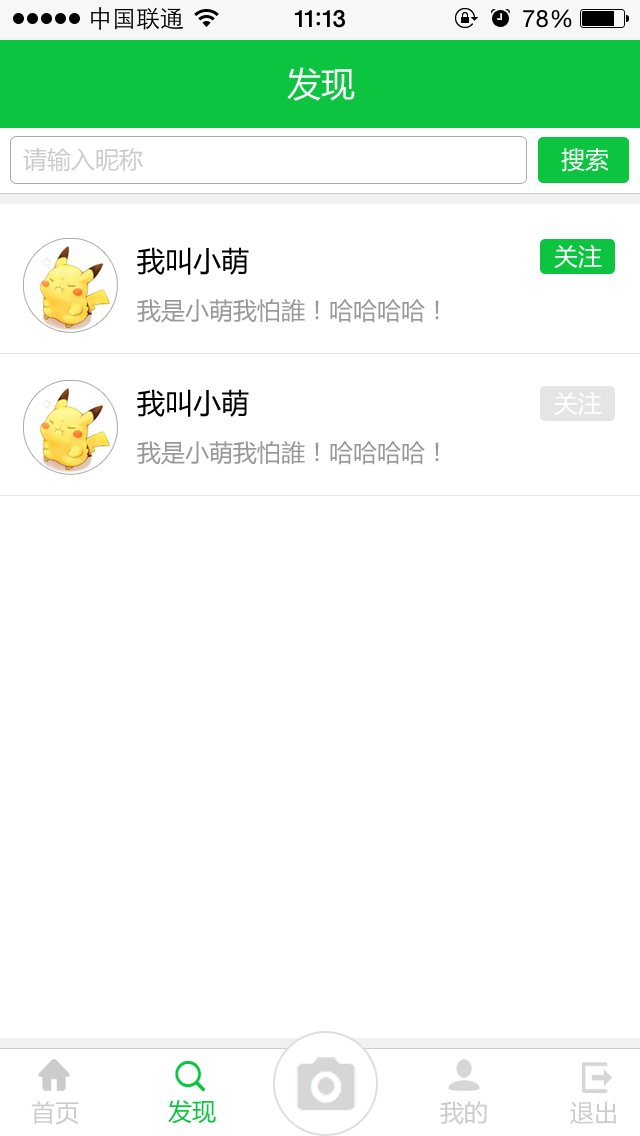
<style>
.page{position:relative;width:640px;height:1136px;background:#ffffff}
.page>*{position:absolute;margin:0}
.t1{font:34px "MicrosoftYaHei";color:#ffffff}
.t2{font:24px "MicrosoftYaHei";color:#cccccc}
.t3{font:24px "MicrosoftYaHei";color:#ffffff}
.t4{font:28px "MicrosoftYaHei";color:#000000}
.t5{font:24px "MicrosoftYaHei";color:#999999}
.t6{font:24px "MicrosoftYaHei";color:#0dc441}
</style>
<div class="page">
<p class="t1" style="left:287px;top:67px;width:68px;height:34px">发现</p>
<p class="t2" style="left:23px;top:148px;width:120px;height:24px">请输入昵称</p>
<p class="t3" style="left:561px;top:148px;width:48px;height:24px">搜索</p>
<p class="t3" style="left:554px;top:244px;width:48px;height:24px">关注</p>
<p class="t4" style="left:137px;top:247px;width:112px;height:28px">我叫小萌</p>
<p class="t5" style="left:137px;top:299px;width:302px;height:24px">我是小萌我怕誰！哈哈哈哈！</p>
<p class="t4" style="left:137px;top:389px;width:112px;height:28px">我叫小萌</p>
<p class="t3" style="left:554px;top:391px;width:48px;height:24px">关注</p>
<p class="t5" style="left:137px;top:441px;width:302px;height:24px">我是小萌我怕誰！哈哈哈哈！</p>
<p class="t2" style="left:31px;top:1101px;width:48px;height:24px">首页</p>
<p class="t6" style="left:168px;top:1100px;width:48px;height:24px">发现</p>
<p class="t2" style="left:440px;top:1101px;width:47px;height:23px">我的</p>
<p class="t2" style="left:570px;top:1101px;width:46px;height:23px">退出</p>
</div>
